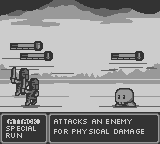
<style>
.page{position:relative;width:160px;height:144px;background:#cccccc}
.page>*{position:absolute;margin:0}
.t1{font:8px "Silkscreen";letter-spacing:-0.1em;color:#333333}
.t2{font:8px "Silkscreen";letter-spacing:-0.1em;color:#cccccc}
</style>
<div class="page">
<p class="t1" style="left:6px;top:119px;width:35px;height:5px">[attack]</p>
<p class="t2" style="left:6px;top:126px;width:30px;height:5px">special</p>
<p class="t2" style="left:54px;top:119px;width:90px;height:15px">Attacks an enemy<br>for physical damage</p>
<p class="t2" style="left:6px;top:133px;width:16px;height:5px">run</p>
</div>
